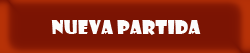
<style>
.page{position:relative;width:250px;height:53px;background:#7b1403}
.page>*{position:absolute;margin:0}
.t1{font:19.4px "ShowcardGothic-Reg";color:#fcfcfc}
</style>
<div class="page">
<p class="t1" style="left:51px;top:20px;width:150px;height:15px">Nueva Partida</p>
</div>
